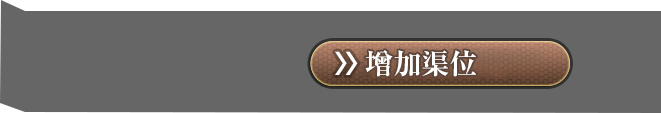
<style>
.page{position:relative;width:661px;height:113px;background:#666666}
.page>*{position:absolute;margin:0}
.t1{font:28px "RyuminPr6N-ExBold";color:#ffffff}
</style>
<div class="page">
<p class="t1" style="left:365px;top:50px;width:111px;height:27px">增加渠位</p>
</div>
